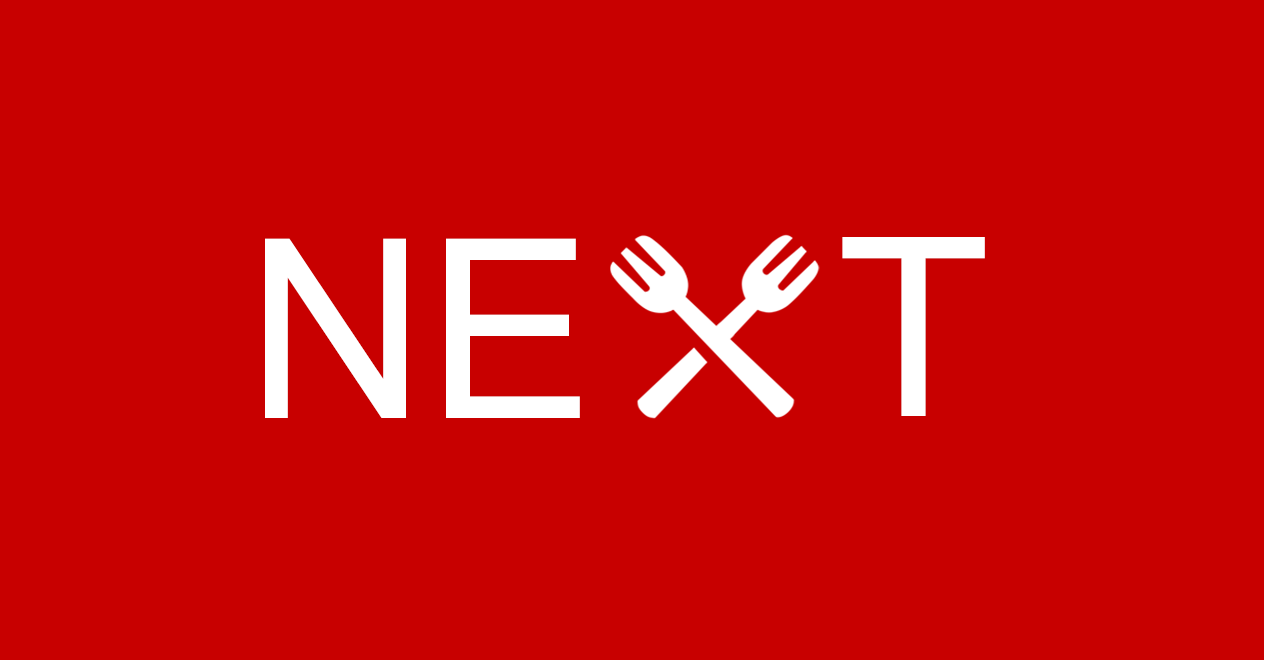
<style>
.page{position:relative;width:1264px;height:660px;background:#c80000}
.page>*{position:absolute;margin:0}
.t1{font:250px "ArialMT";color:#ffffff}
</style>
<div class="page">
<p class="t1" style="left:265px;top:238px;width:315px;height:180px">NE</p>
<p class="t1" style="left:842px;top:237px;width:143px;height:179px">T</p>
</div>
